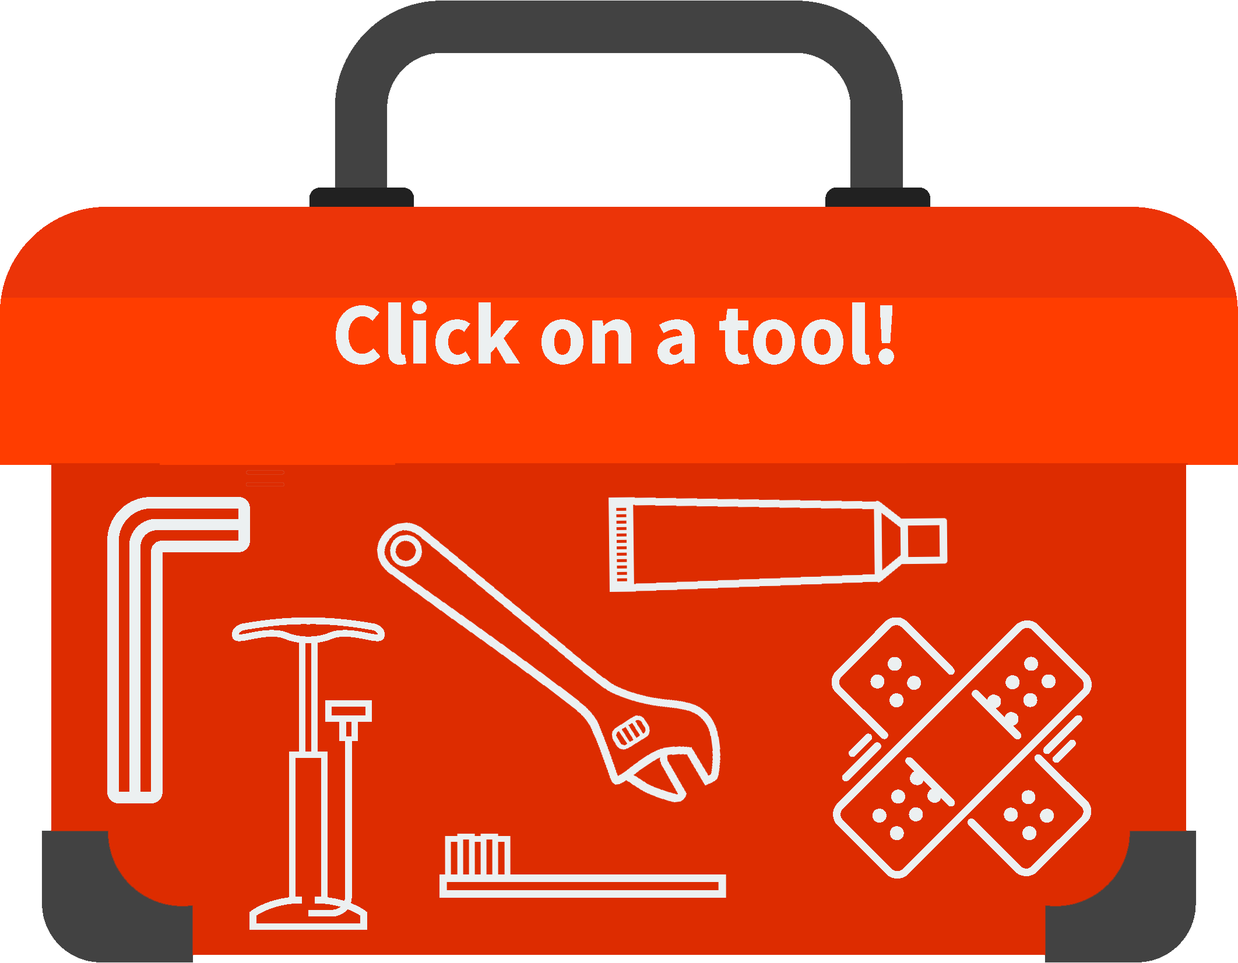
<style>
.page{position:relative;width:1238px;height:963px;background:#dd2c00}
.page>*{position:absolute;margin:0}
.t1{font:87.4px "SourceSansPro-Bold";color:#ecf0f1}
</style>
<div class="page">
<p class="t1" style="left:336px;top:301px;width:558px;height:64px">Click on a tool!</p>
</div>
